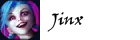
<style>
.page{position:relative;width:140px;height:40px;background:#ffffff}
.page>*{position:absolute;margin:0}
.t1{font:12px "VinerHandITC";color:#000000}
</style>
<div class="page">
<p class="t1" style="left:47px;top:12px;width:37px;height:20px">Jinx</p>
</div>
